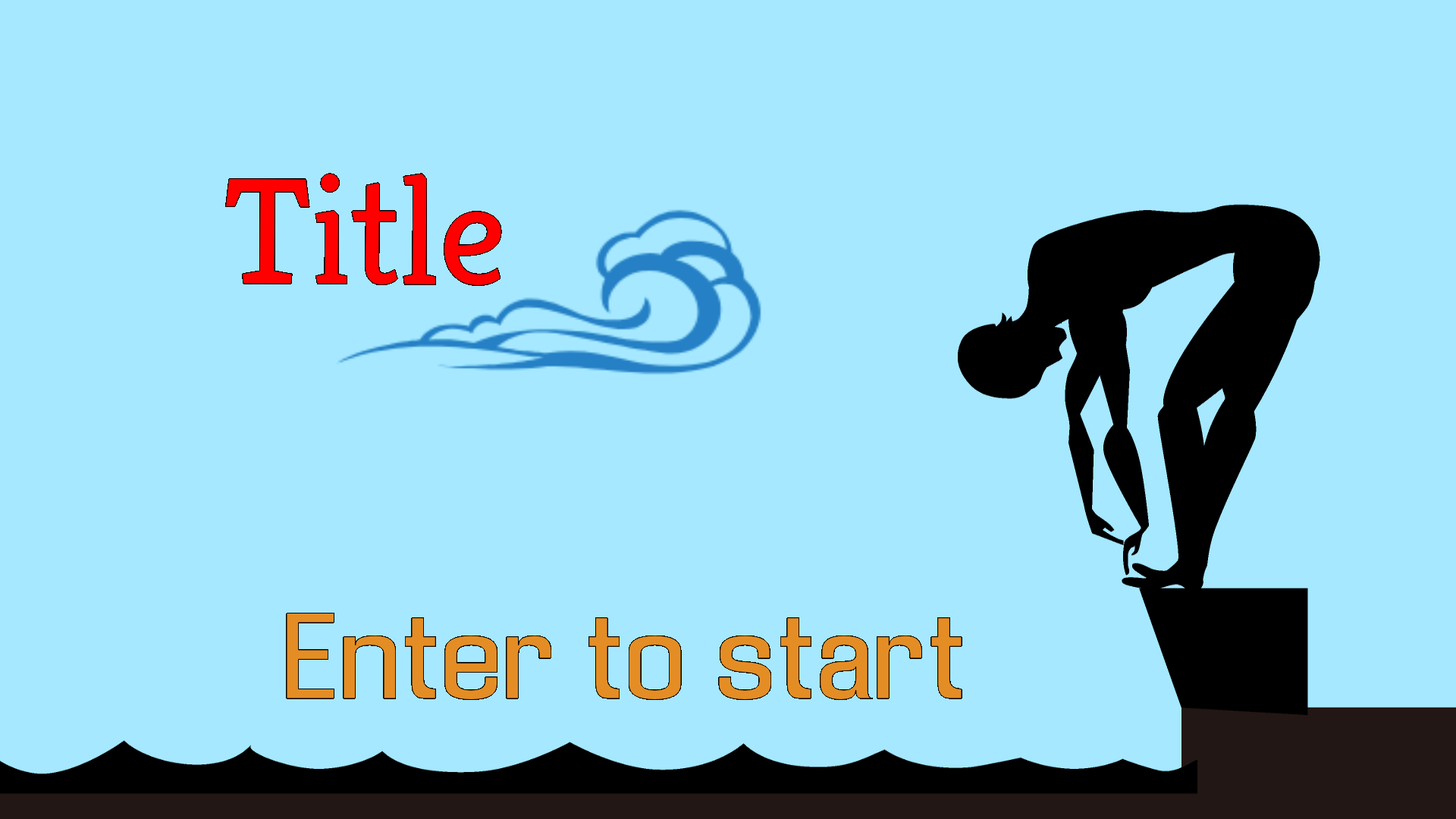
<style>
.page{position:relative;width:1456px;height:819px;background:#a5e8ff}
.page>*{position:absolute;margin:0}
.t1{font:151.7px "Kreon-Regular";color:#ff0000}
.t2{font:113.7px "Enigmatic";color:#e48d25}
</style>
<div class="page">
<p class="t1" style="left:224px;top:172px;width:279px;height:115px">Title</p>
<p class="t2" style="left:286px;top:612px;width:676px;height:89px">Enter to start</p>
</div>
